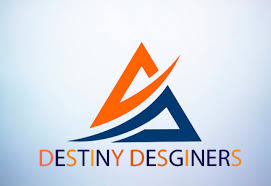
<style>
.page{position:relative;width:271px;height:186px}
.page>*{position:absolute;margin:0}
.t1{font:24px "MyriadPro-Regular";color:#0a0445}
.t2{font:24px "MyriadPro-Regular";color:#ff6434}
.t3{font:24px "MyriadPro-Regular";color:#ed8000}
.t4{font:24px "MyriadPro-Regular";color:#ff9308}
.t5{font:24px "MyriadPro-Regular";color:#e15602}
.t6{font:24px "MyriadPro-Regular";color:#db5301}
.t7{font:24px "MyriadPro-Regular";color:#e46600}
.t8{font:24px "MyriadPro-Regular";color:#fb8800}
.t9{font:24px "MyriadPro-Regular";color:#fb8608}
</style>
<div class="page">
<p class="t1" style="left:39px;top:149px;width:203px;height:18px"><span class="t2">D</span>E<span class="t3">S</span>T<span class="t4">I</span>N<span class="t5">Y </span><span class="t6">D</span>E<span class="t7">S</span>G<span class="t8">I</span>NER<span class="t9">S</span></p>
</div>
